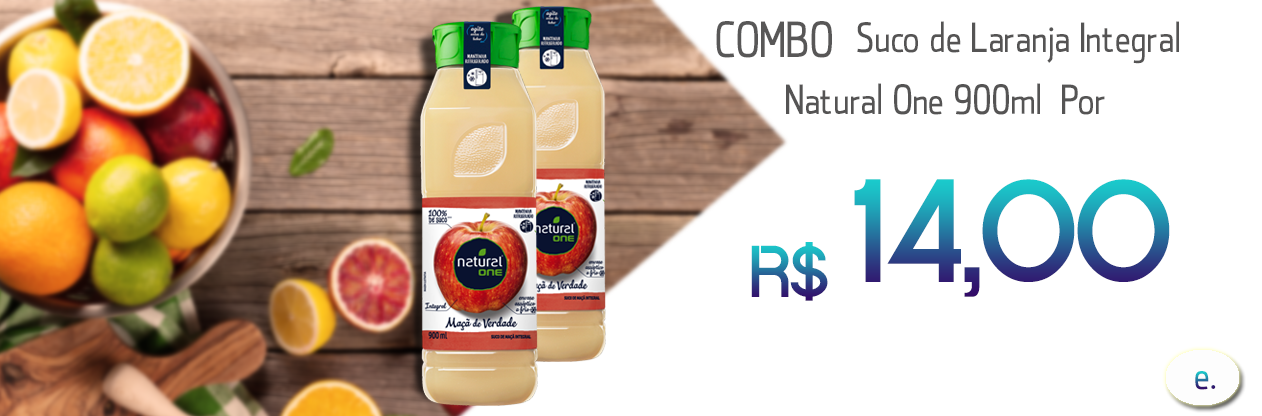
<style>
.page{position:relative;width:1262px;height:416px;background:#ffffff}
.page>*{position:absolute;margin:0}
.t1{font:50px "qontra-Regular";letter-spacing:-0.025em;color:#555454}
.t2{font:41.7px "qontra-Regular";letter-spacing:-0.025em;color:#555454}
.t3{font:150px "Quantum";letter-spacing:-0.025em}
.t4{font:75px "Quantum";letter-spacing:-0.025em}
</style>
<div class="page">
<p class="t1" style="left:716px;top:21px;width:116px;height:37px">COMBO</p>
<p class="t2" style="left:857px;top:21px;width:322px;height:43px">Suco de Laranja Integral</p>
<p class="t2" style="left:786px;top:83px;width:319px;height:32px">Natural One 900ml  Por</p>
<p class="t3" style="left:854px;top:179px;width:316px;height:118px">14,00</p>
<p class="t4" style="left:751px;top:242px;width:77px;height:59px">R$</p>
</div>
